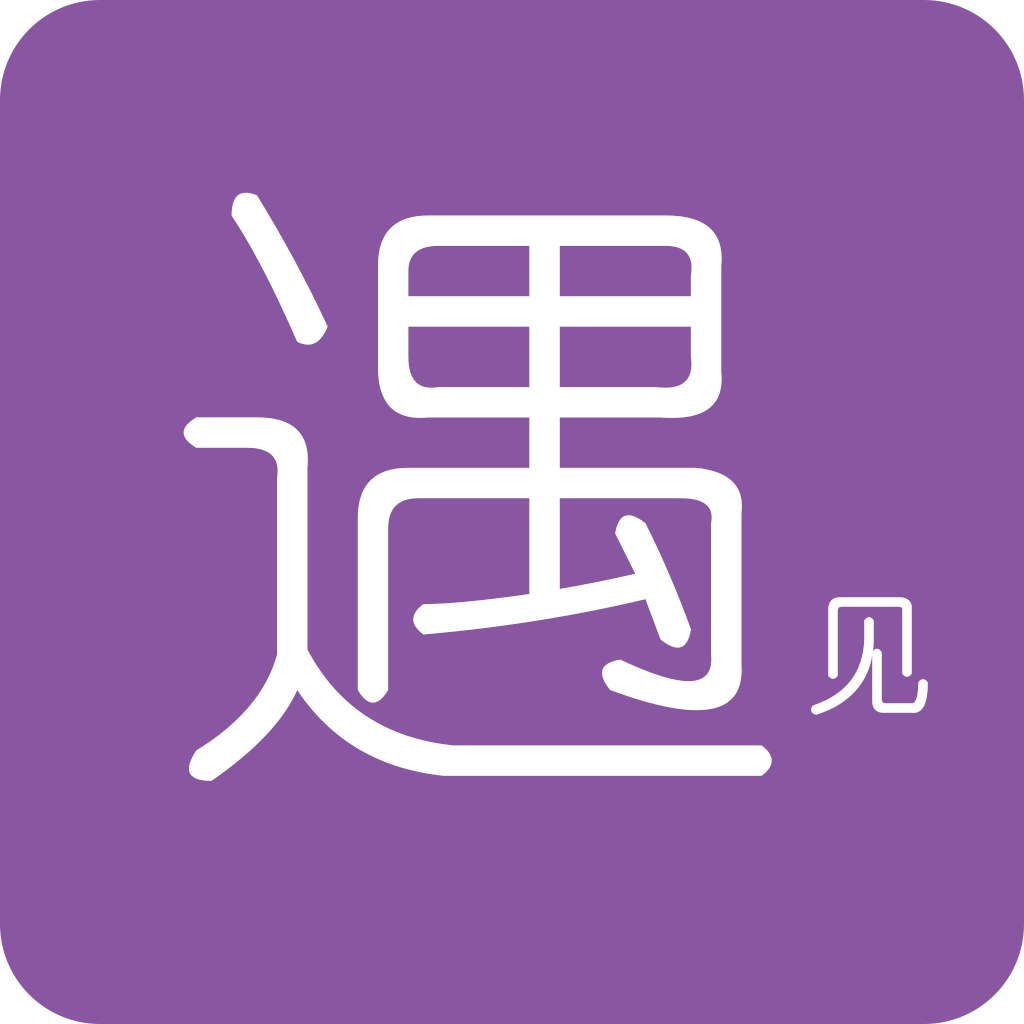
<style>
.page{position:relative;width:1024px;height:1024px;background:#8957a1}
.page>*{position:absolute;margin:0}
.t1{font:646px "YouYuan";color:#ffffff}
.t2{font:128px "YouYuan";color:#ffffff;font-weight:bold}
</style>
<div class="page">
<p class="t1" style="left:183px;top:192px;width:745px;height:589px">遇<span class="t2">见</span></p>
</div>
